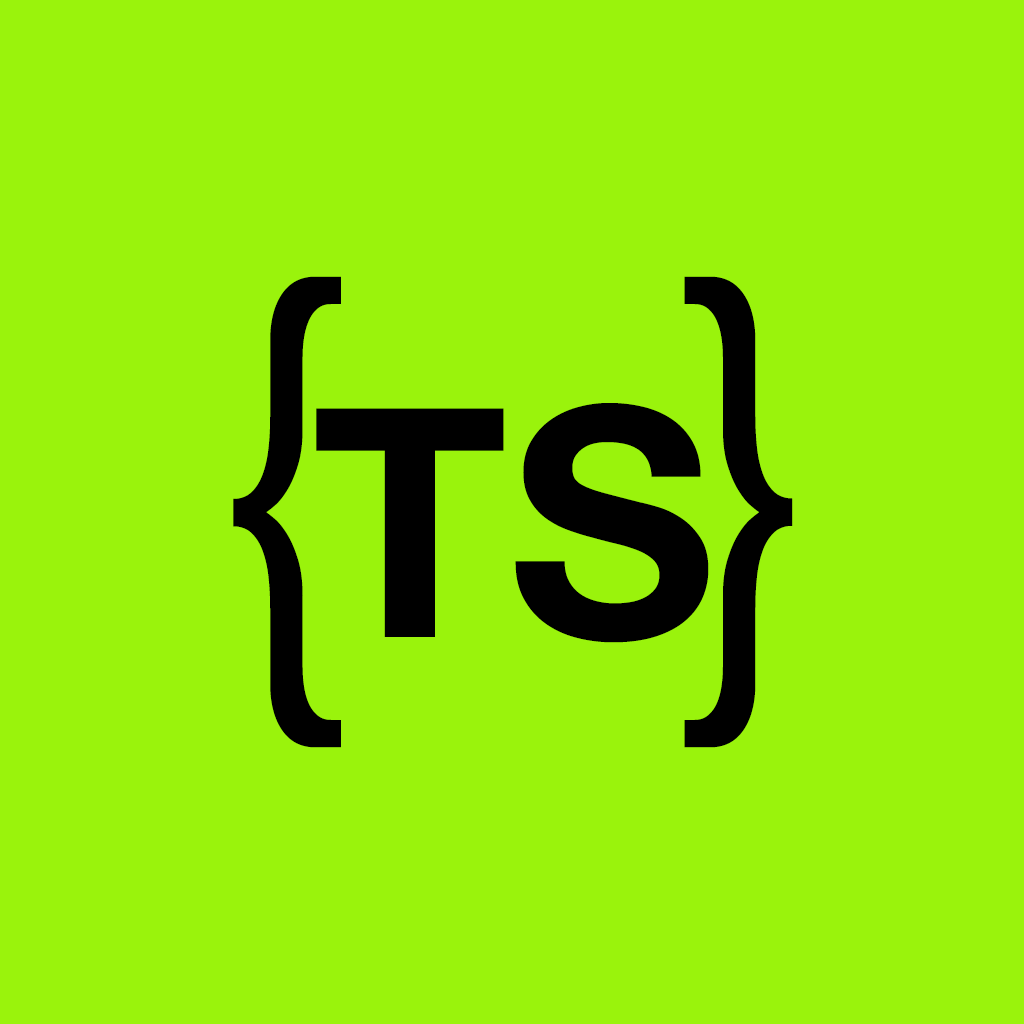
<style>
.page{position:relative;width:1024px;height:1024px;background:#9af30c}
.page>*{position:absolute;margin:0}
.t1{font:512px "HelveticaNeue-Light";color:#000000}
.t2{font:320px "HelveticaNeue-Bold";color:#000000}
</style>
<div class="page">
<p class="t1" style="left:233px;top:276px;width:108px;height:472px">{</p>
<p class="t1" style="left:684px;top:276px;width:109px;height:472px">}</p>
<p class="t2" style="left:316px;top:403px;width:393px;height:240px">TS</p>
</div>
